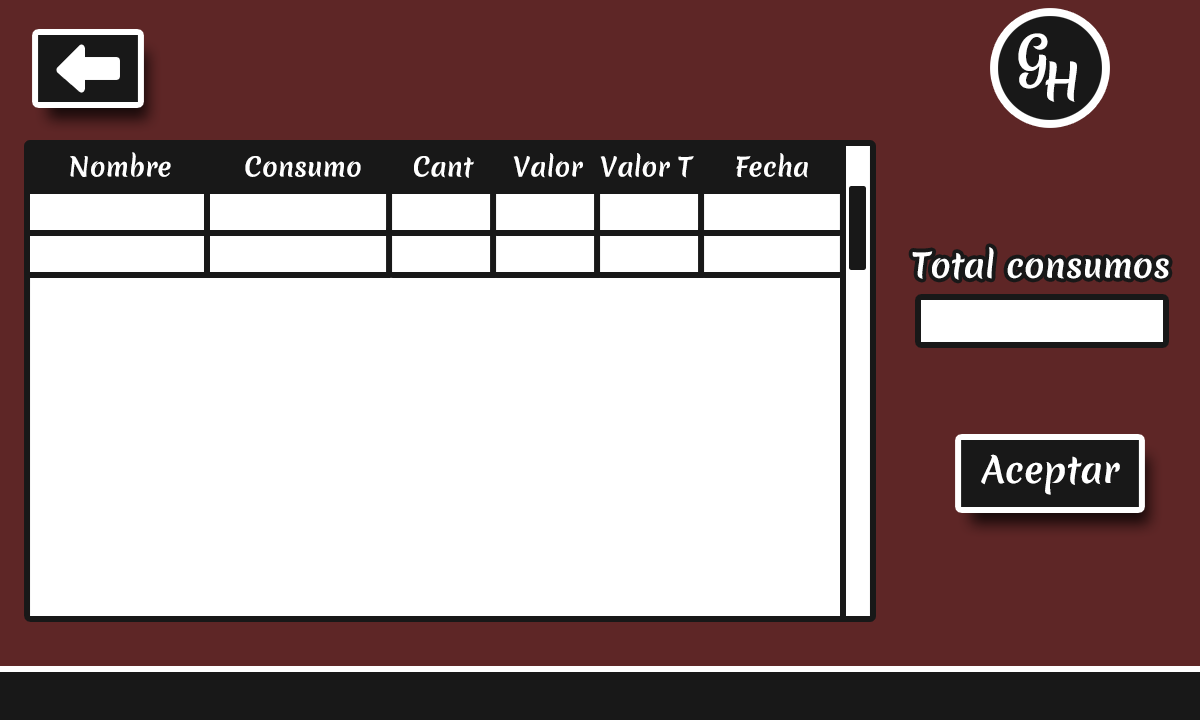
<style>
.page{position:relative;width:1200px;height:720px;background:#ffffff}
.page>*{position:absolute;margin:0}
.t1{font:48.4px "MeriendaOne-Regular";color:#ffffff}
.t2{font:25.4px "MeriendaOne-Regular";color:#ffffff}
.t3{font:33.1px "MeriendaOne-Regular";color:#ffffff}
.t4{font:35.1px "MeriendaOne-Regular";color:#ffffff}
</style>
<div class="page">
<p class="t1" style="left:1018px;top:33px;width:30px;height:56px">G</p>
<p class="t1" style="left:1045px;top:61px;width:32px;height:41px">H</p>
<p class="t2" style="left:70px;top:152px;width:101px;height:25px">Nombre</p>
<p class="t2" style="left:245px;top:156px;width:116px;height:21px">Consumo</p>
<p class="t2" style="left:414px;top:156px;width:60px;height:22px">Cant</p>
<p class="t2" style="left:513px;top:153px;width:70px;height:25px">Valor</p>
<p class="t2" style="left:600px;top:153px;width:94px;height:25px">Valor T</p>
<p class="t2" style="left:736px;top:153px;width:72px;height:25px">Fecha</p>
<p class="t3" style="left:912px;top:247px;width:257px;height:33px">Total consumos</p>
<p class="t4" style="left:981px;top:454px;width:139px;height:41px">Aceptar</p>
</div>
